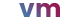
<style>
.page{position:relative;width:80px;height:20px;background:#ffffff}
.page>*{position:absolute;margin:0}
.t1{font:25px "Poppins-Bold"}
</style>
<div class="page">
<p class="t1" style="left:19px;top:3px;width:41px;height:14px">vm</p>
</div>
